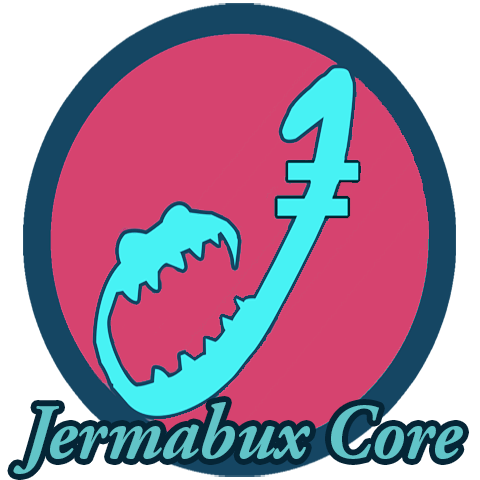
<style>
.page{position:relative;width:480px;height:480px;background:#d6436f}
.page>*{position:absolute;margin:0}
.t1{font:78.5px "AGaramondPro-BoldItalic";color:#61c4c8;scale:0.92 1}
</style>
<div class="page">
<p class="t1" style="left:13px;top:402px;width:450px;height:72px">Jermabux Core</p>
</div>
